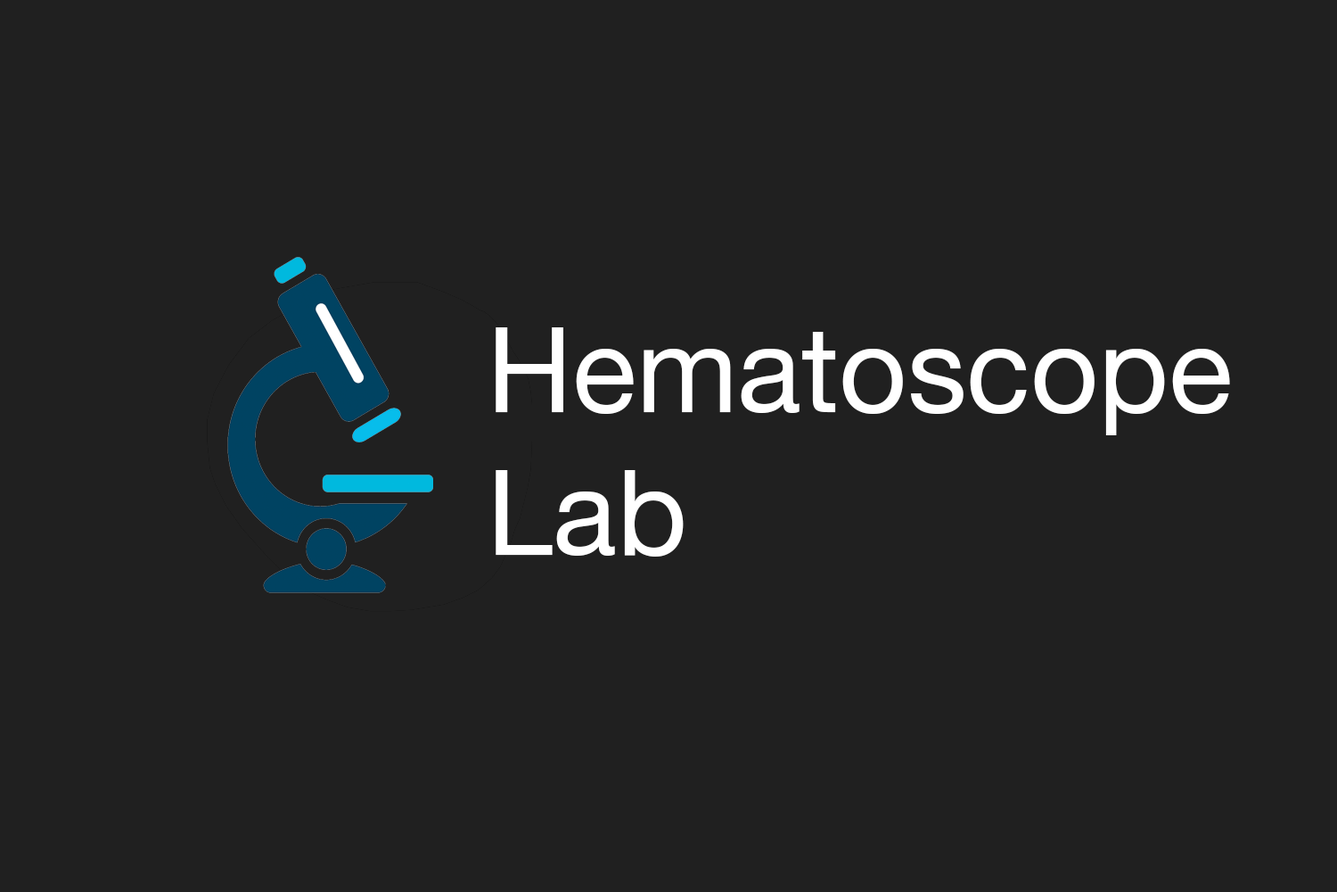
<style>
.page{position:relative;width:1337px;height:892px;background:#202020}
.page>*{position:absolute;margin:0}
.t1{font:118.9px "HelveticaNeue";color:#ffffff}
</style>
<div class="page">
<p class="t1" style="left:496px;top:327px;width:734px;height:229px">Hematoscope<br>Lab</p>
</div>
